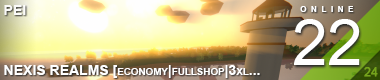
<style>
.page{position:relative;width:380px;height:80px}
.page>*{position:absolute;margin:0}
.t1{font:14px "Arial-BoldMT";color:#ffffff;font-variant:small-caps}
.t2{font:12px "Arial-BoldMT";letter-spacing:0.52em;color:#ffffff;font-variant:small-caps}
.t3{font:64px "ArialMT";color:#ffffff;font-variant:small-caps}
.t4{font:12px "ArialMT";color:#75a31c;font-variant:small-caps;font-weight:bold}
</style>
<div class="page">
<p class="t1" style="left:4px;top:5px;width:22px;height:10px;opacity:0.3">PEI</p>
<p class="t1" style="left:4px;top:5px;width:22px;height:10px;opacity:0.9">PEI</p>
<p class="t2" style="left:300px;top:6px;width:54px;height:6px">online</p>
<p class="t3" style="left:294px;top:19px;width:66px;height:46px">22</p>
<p class="t1" style="left:4px;top:65px;width:256px;height:13px;opacity:0.3">NEXIS REALMS [economy|fullshop|3xl...</p>
<p class="t1" style="left:4px;top:65px;width:256px;height:13px">NEXIS REALMS [economy|fullshop|3xl...</p>
<p class="t4" style="left:364px;top:67px;width:14px;height:10px">24</p>
</div>
